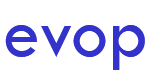
<style>
.page{position:relative;width:150px;height:80px;background:#ffffff}
.page>*{position:absolute;margin:0}
.t1{font:73.8px "TwCenMT-Regular";color:#3333cc}
</style>
<div class="page">
<p class="t1" style="left:5px;top:25px;width:140px;height:45px">evop</p>
</div>
